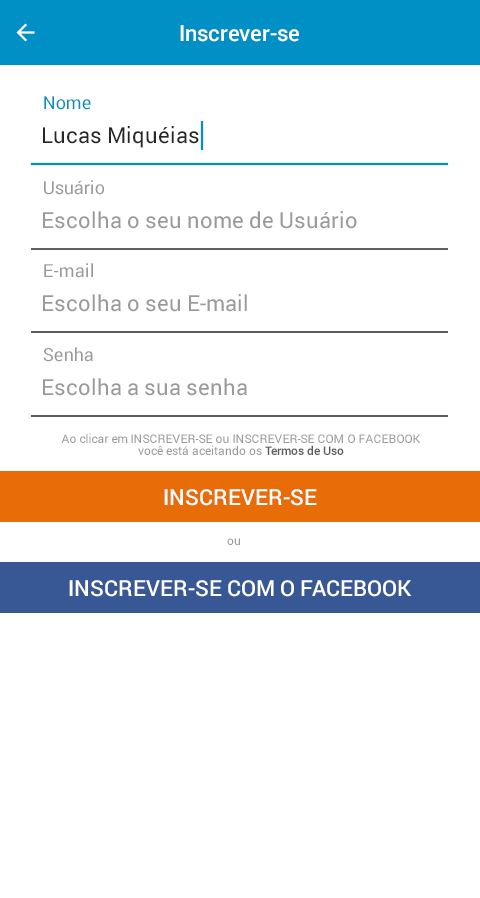
<style>
.page{position:relative;width:480px;height:898px;background:#ffffff}
.page>*{position:absolute;margin:0}
.t1{font:22px "Roboto-Medium";color:#ffffff}
.t2{font:18px "Roboto-Regular";color:#0190c5}
.t3{font:22px "Roboto-Regular";color:#272727}
.t4{font:18px "Roboto-Regular";color:#9a9a9a}
.t5{font:22px "Roboto-Regular";color:#9a9a9a}
.t6{font:12px/12px "Roboto-Regular";color:#9a9a9a}
.t7{font:12px/12px "Roboto-Medium";color:#5c5c5c}
.t8{font:12px "Roboto-Regular";color:#9a9a9a}
</style>
<div class="page">
<p class="t1" style="left:180px;top:25px;width:119px;height:17px">Inscrever-se</p>
<p class="t2" style="left:44px;top:96px;width:47px;height:14px">Nome</p>
<p class="t3" style="left:43px;top:126px;width:156px;height:22px">Lucas Miquéias</p>
<p class="t4" style="left:44px;top:180px;width:60px;height:15px">Usuário</p>
<p class="t5" style="left:43px;top:211px;width:314px;height:18px">Escolha o seu nome de Usuário</p>
<p class="t4" style="left:44px;top:263px;width:49px;height:15px">E-mail</p>
<p class="t5" style="left:43px;top:294px;width:204px;height:18px">Escolha o seu E-mail</p>
<p class="t4" style="left:43px;top:347px;width:50px;height:15px">Senha</p>
<p class="t5" style="left:43px;top:378px;width:204px;height:18px">Escolha a sua senha</p>
<p class="t6" style="left:61px;top:433px;width:360px;height:22px;text-align:center">Ao clicar em INSCREVER-SE ou INSCREVER-SE COM O FACEBOOK<br>você está aceitando os <span class="t7">Termos de Uso</span></p>
<p class="t1" style="left:164px;top:489px;width:153px;height:17px">INSCREVER-SE</p>
<p class="t8" style="left:227px;top:538px;width:13px;height:7px">ou</p>
<p class="t1" style="left:69px;top:580px;width:343px;height:17px">INSCREVER-SE COM O FACEBOOK</p>
</div>
